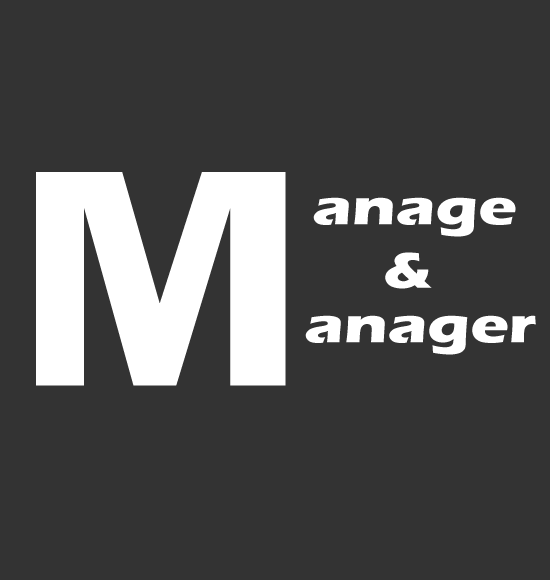
<style>
.page{position:relative;width:550px;height:580px;background:#333333}
.page>*{position:absolute;margin:0}
.t1{font:320px "FranklinGothic-DemiCond";color:#ffffff;scale:1.25 1}
.t2{font:52px "ErasITC-Bold";color:#ffffff;scale:1.25 1}
</style>
<div class="page">
<p class="t1" style="left:36px;top:172px;width:250px;height:214px">M</p>
<p class="t2" style="left:313px;top:197px;width:203px;height:40px">anage</p>
<p class="t2" style="left:385px;top:252px;width:47px;height:37px">&amp;</p>
<p class="t2" style="left:305px;top:315px;width:231px;height:40px">anager</p>
</div>
